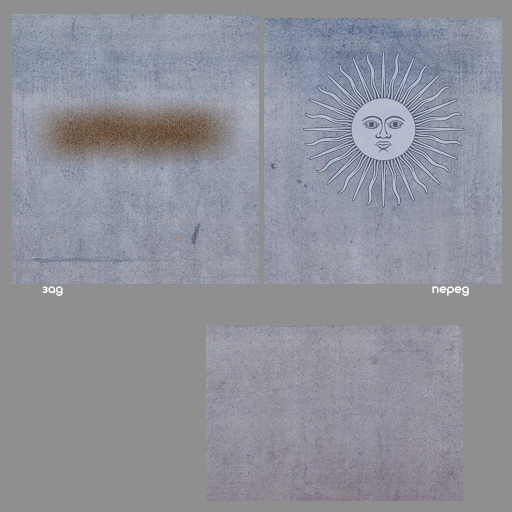
<style>
.page{position:relative;width:512px;height:512px;background:#8f8f8f}
.page>*{position:absolute;margin:0}
.t1{font:12px "Comfortaa-Bold";color:#ffffff}
</style>
<div class="page">
<p class="t1" style="left:42px;top:286px;width:21px;height:10px">зад</p>
<p class="t1" style="left:432px;top:286px;width:37px;height:10px">перед</p>
</div>
